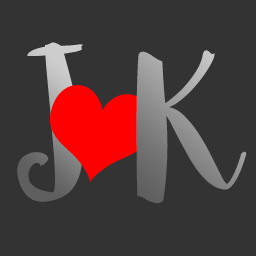
<style>
.page{position:relative;width:256px;height:256px;background:#333333}
.page>*{position:absolute;margin:0}
.t1{font:198.4px "Sophia";letter-spacing:-0.01em}
.t2{font:200.4px "Sophia";letter-spacing:-0.01em}
</style>
<div class="page">
<p class="t1" style="left:17px;top:42px;width:66px;height:160px">J</p>
<p class="t2" style="left:136px;top:50px;width:111px;height:154px">K</p>
</div>
